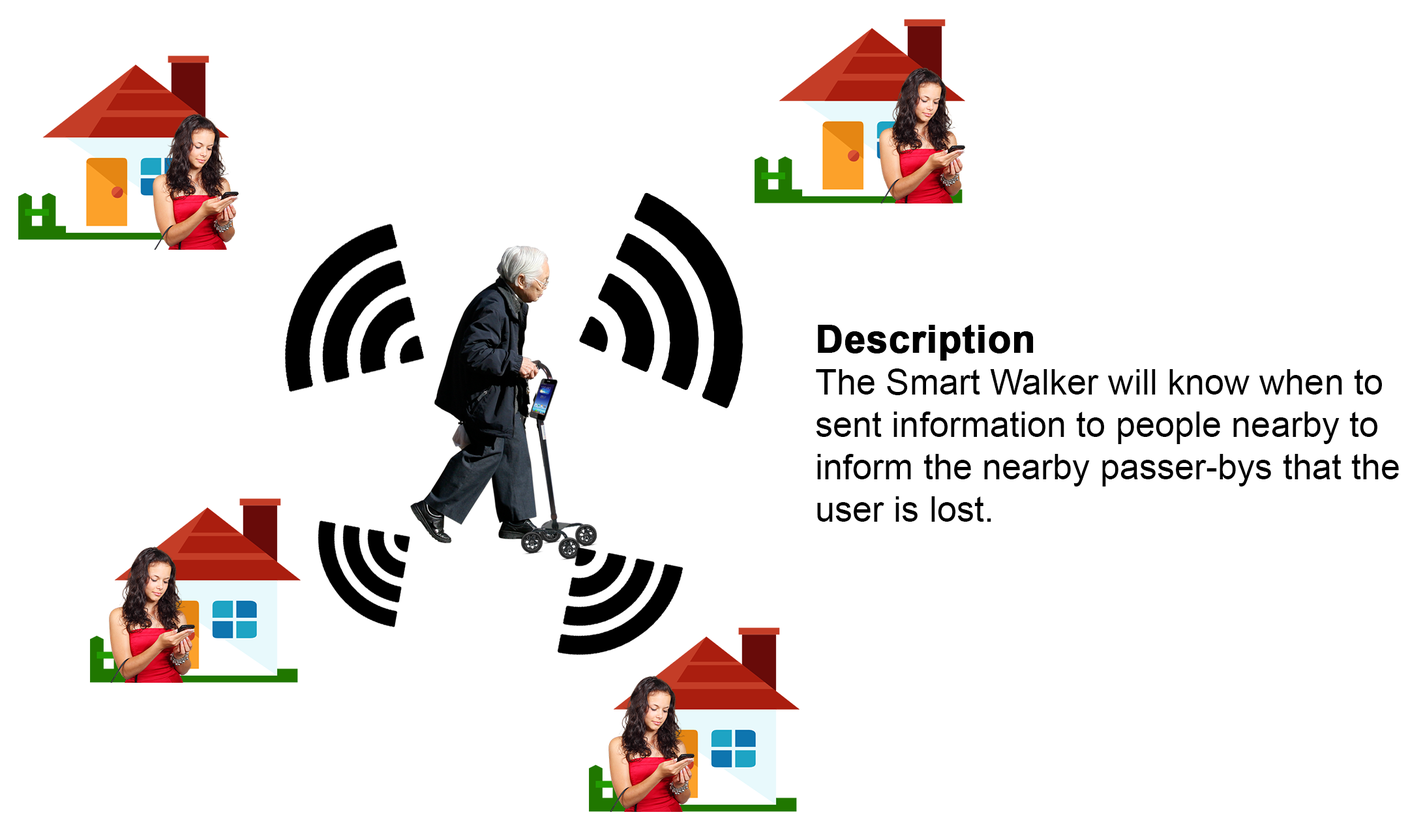
<style>
.page{position:relative;width:1423px;height:838px;background:#ffffff}
.page>*{position:absolute;margin:0}
.t1{font:35.3px "ArialMT";color:#000000}
.t2{font:38px "Arial-BoldMT";color:#000000;font-weight:bold}
</style>
<div class="page">
<p class="t1" style="left:816px;top:325px;width:583px;height:197px"><span class="t2">Description<br></span>The Smart Walker will know when to <br>sent information to people nearby to <br>inform the nearby passer-bys that the <br>user is lost.</p>
</div>
